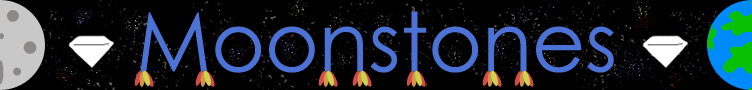
<style>
.page{position:relative;width:752px;height:90px;background:#000000}
.page>*{position:absolute;margin:0}
.t1{font:82px "CenturyGothic";color:#4b72d4}
</style>
<div class="page">
<p class="t1" style="left:140px;top:11px;width:474px;height:62px">Moonstones</p>
</div>
